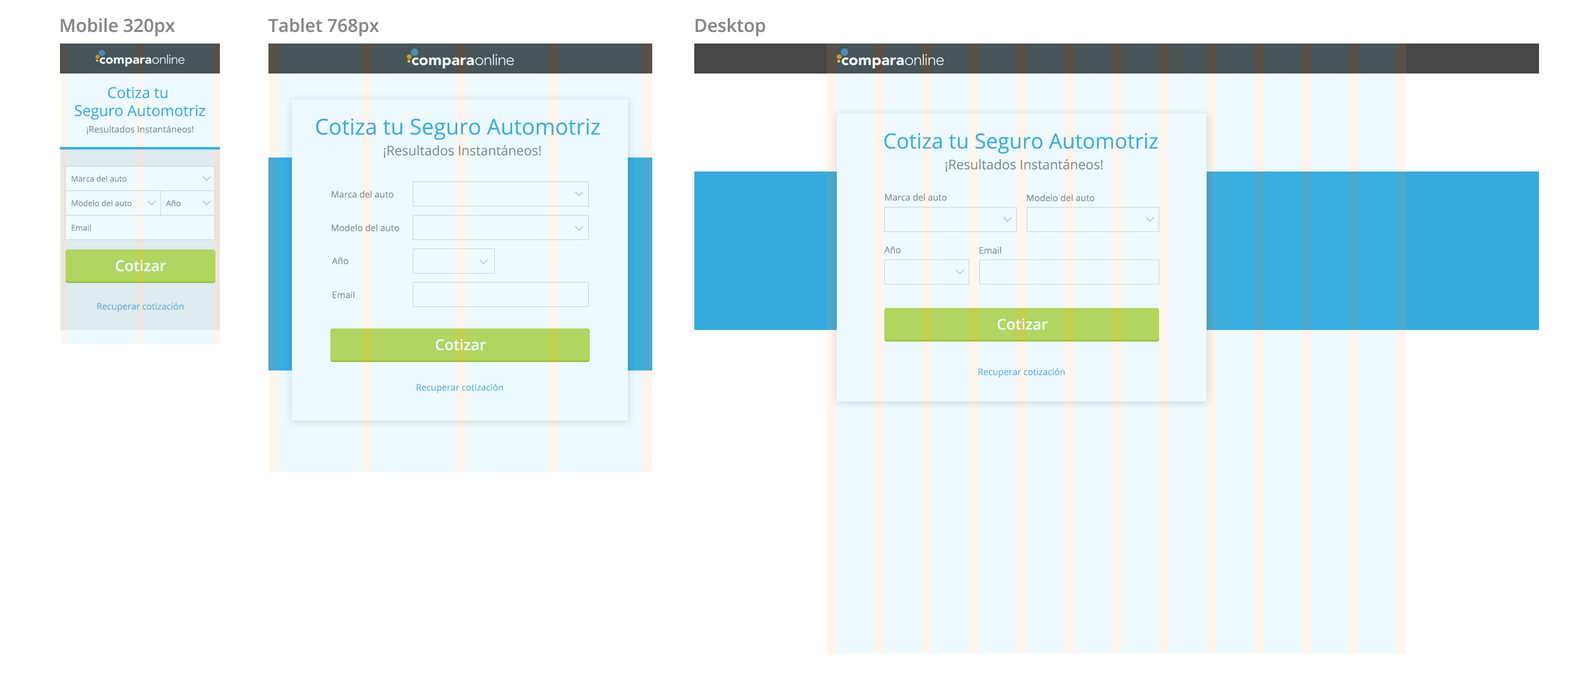
<style>
.page{position:relative;width:1586px;height:694px;background:#ffffff}
.page>*{position:absolute;margin:0}
.t1{font:18px "OpenSans-Semibold";color:#888888}
.t2{font:15px "OpenSans";color:#36aadd}
.t3{font:9px "OpenSans";color:#888888}
.t4{font:21.8px "OpenSans";color:#36aadd}
.t5{font:21px "OpenSans";color:#36aadd}
.t6{font:13.3px "OpenSans";color:#888888}
.t7{font:8px "OpenSans";color:#888888}
.t8{font:15px "OpenSans-Semibold";color:#ffffff}
.t9{font:9px "OpenSans";color:#5faadb}
</style>
<div class="page">
<p class="t1" style="left:60px;top:18px;width:115px;height:18px">Mobile 320px</p>
<p class="t1" style="left:268px;top:18px;width:111px;height:18px">Tablet 768px</p>
<p class="t1" style="left:696px;top:18px;width:70px;height:18px">Desktop</p>
<p class="t2" style="left:74px;top:86px;width:132px;height:34px;text-align:center">Cotiza tu <br>Seguro Automotriz</p>
<p class="t3" style="left:86px;top:126px;width:108px;height:8px">¡Resultados Instantáneos!</p>
<p class="t4" style="left:316px;top:118px;width:284px;height:22px">Cotiza tu Seguro Automotriz</p>
<p class="t5" style="left:884px;top:133px;width:274px;height:21px">Cotiza tu Seguro Automotriz</p>
<p class="t6" style="left:384px;top:145px;width:157px;height:13px">¡Resultados Instantáneos!</p>
<p class="t6" style="left:946px;top:159px;width:157px;height:13px">¡Resultados Instantáneos!</p>
<p class="t7" style="left:72px;top:176px;width:54px;height:6px">Marca del auto</p>
<p class="t3" style="left:332px;top:190px;width:62px;height:8px">Marca del auto</p>
<p class="t3" style="left:885px;top:194px;width:62px;height:7px">Marca del auto</p>
<p class="t3" style="left:1027px;top:194px;width:68px;height:8px">Modelo del auto</p>
<p class="t7" style="left:72px;top:200px;width:60px;height:6px">Modelo del auto</p>
<p class="t7" style="left:166px;top:200px;width:14px;height:6px">Año</p>
<p class="t7" style="left:72px;top:224px;width:19px;height:7px">Email</p>
<p class="t3" style="left:332px;top:224px;width:68px;height:8px">Modelo del auto</p>
<p class="t3" style="left:332px;top:258px;width:16px;height:6px">Año</p>
<p class="t3" style="left:884px;top:246px;width:17px;height:8px">Año</p>
<p class="t3" style="left:980px;top:246px;width:22px;height:8px">Email</p>
<p class="t8" style="left:116px;top:260px;width:50px;height:12px">Cotizar</p>
<p class="t3" style="left:332px;top:291px;width:22px;height:7px">Email</p>
<p class="t9" style="left:97px;top:302px;width:87px;height:10px">Recuperar cotización</p>
<p class="t8" style="left:998px;top:318px;width:50px;height:12px">Cotizar</p>
<p class="t8" style="left:436px;top:338px;width:50px;height:12px">Cotizar</p>
<p class="t9" style="left:978px;top:368px;width:87px;height:10px">Recuperar cotización</p>
<p class="t9" style="left:416px;top:384px;width:87px;height:9px">Recuperar cotización</p>
</div>
